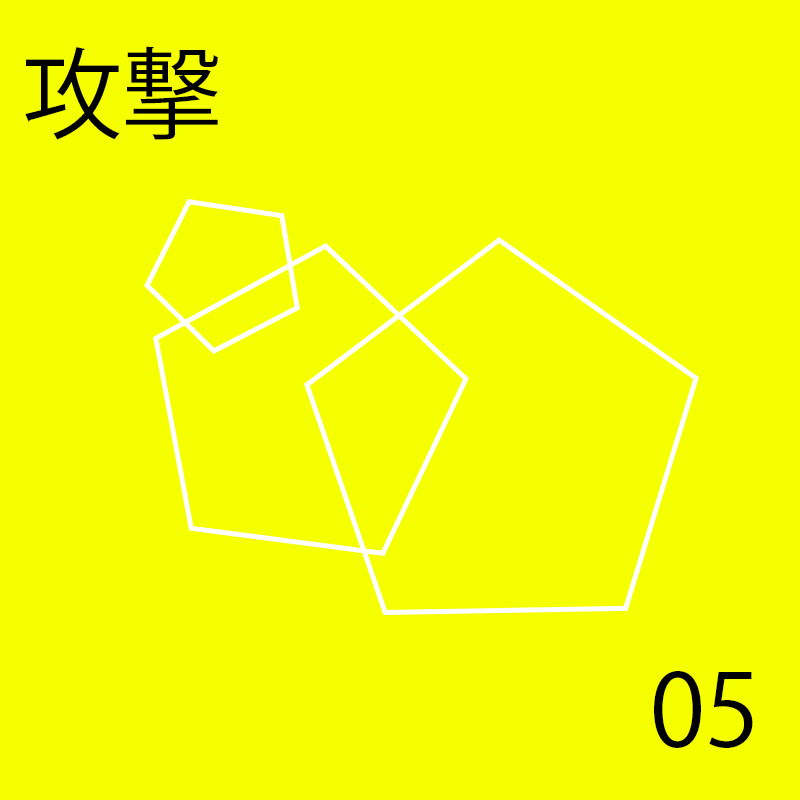
<style>
.page{position:relative;width:800px;height:800px;background:#f6ff00}
.page>*{position:absolute;margin:0}
.t1{font:100px "KozGoPr6N-Regular";color:#000000}
</style>
<div class="page">
<p class="t1" style="left:25px;top:46px;width:193px;height:94px">攻撃</p>
<p class="t1" style="left:25px;top:46px;width:193px;height:94px">攻撃</p>
<p class="t1" style="left:25px;top:46px;width:193px;height:94px">攻撃</p>
<p class="t1" style="left:25px;top:46px;width:193px;height:94px">攻撃</p>
<p class="t1" style="left:25px;top:46px;width:193px;height:94px">攻撃</p>
<p class="t1" style="left:25px;top:46px;width:193px;height:94px">攻撃</p>
<p class="t1" style="left:654px;top:671px;width:102px;height:77px">00</p>
<p class="t1" style="left:654px;top:671px;width:85px;height:77px">01</p>
<p class="t1" style="left:654px;top:671px;width:101px;height:77px">02</p>
<p class="t1" style="left:654px;top:671px;width:99px;height:77px">03</p>
<p class="t1" style="left:654px;top:671px;width:105px;height:77px">04</p>
<p class="t1" style="left:654px;top:671px;width:99px;height:77px">05</p>
</div>
